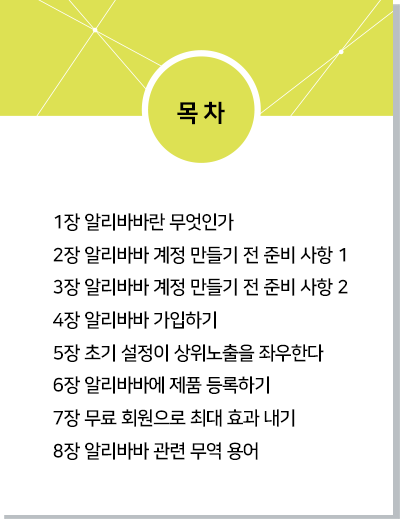
<style>
.page{position:relative;width:400px;height:519px;background:#ffffff}
.page>*{position:absolute;margin:0}
.t1{font:24px "NanumSquare_acEB";color:#000000}
.t2{font:18.7px "NanumSquare_acB";color:#000000}
</style>
<div class="page">
<p class="t1" style="left:177px;top:101px;width:48px;height:24px">목 차</p>
<p class="t2" style="left:54px;top:213px;width:180px;height:18px">1장 알리바바란 무엇인가</p>
<p class="t2" style="left:53px;top:246px;width:293px;height:18px">2장 알리바바 계정 만들기 전 준비 사항 1</p>
<p class="t2" style="left:53px;top:278px;width:295px;height:18px">3장 알리바바 계정 만들기 전 준비 사항 2</p>
<p class="t2" style="left:53px;top:311px;width:163px;height:18px">4장 알리바바 가입하기</p>
<p class="t2" style="left:53px;top:344px;width:271px;height:18px">5장 초기 설정이 상위노출을 좌우한다</p>
<p class="t2" style="left:53px;top:376px;width:216px;height:18px">6장 알리바바에 제품 등록하기</p>
<p class="t2" style="left:53px;top:409px;width:242px;height:18px">7장 무료 회원으로 최대 효과 내기</p>
<p class="t2" style="left:53px;top:442px;width:205px;height:18px">8장 알리바바 관련 무역 용어</p>
</div>
